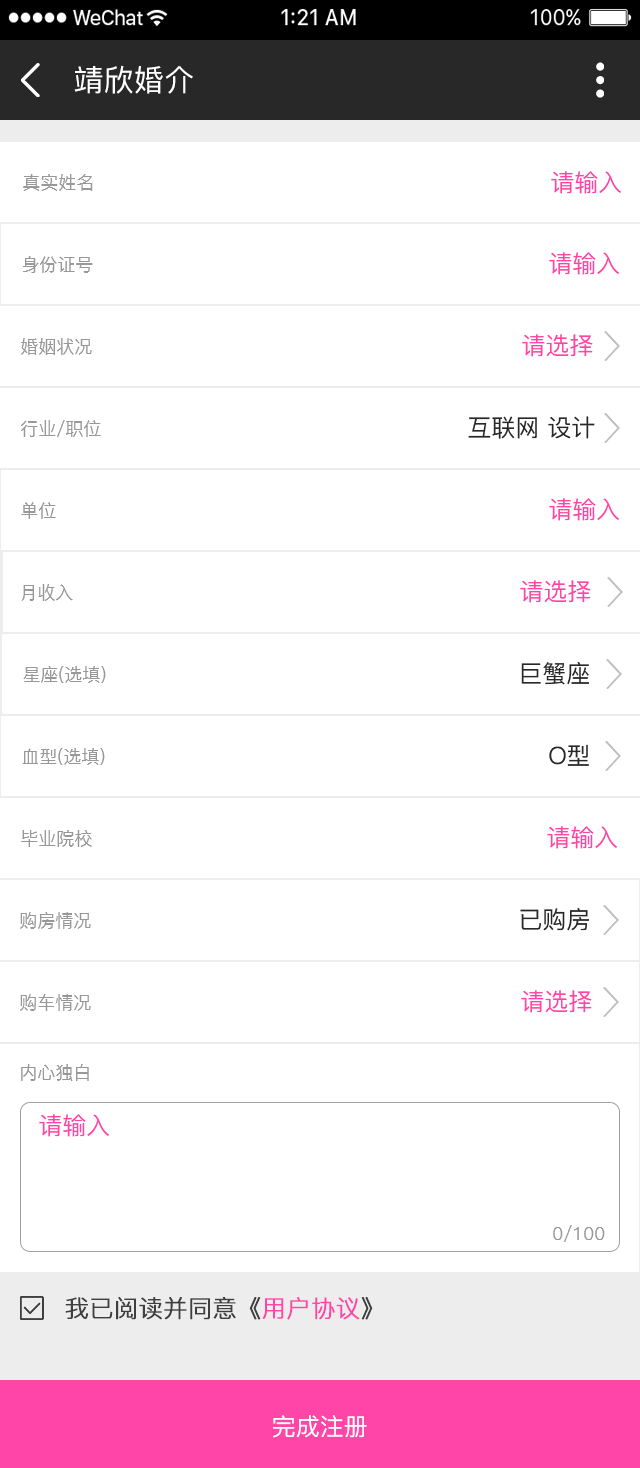
<style>
.page{position:relative;width:640px;height:1468px;background:#ffffff}
.page>*{position:absolute;margin:0}
.t1{font:30px "PingFang-SC-Medium";letter-spacing:0.01em;color:#ffffff;text-transform:uppercase}
.t2{font:18px "PingFang-SC-Medium";color:#989898;text-transform:uppercase}
.t3{font:24px "PingFang-SC-Medium";color:#ff45a8;text-transform:uppercase}
.t4{font:24px "PingFang-SC-Medium";color:#282828;text-transform:uppercase}
.t5{font:24px "PingFang-SC-Regular";color:#3f3f3f;text-transform:uppercase;font-weight:bold}
.t6{font:24px "PingFang-SC-Regular";color:#ff45a8;text-transform:uppercase;font-weight:bold}
.t7{font:24px "PingFang-SC-Medium";color:#ffffff;text-transform:uppercase}
</style>
<div class="page">
<p class="t1" style="left:74px;top:65px;width:119px;height:29px">靖欣婚介</p>
<p class="t2" style="left:23px;top:174px;width:70px;height:17px">真实姓名</p>
<p class="t3" style="left:551px;top:171px;width:71px;height:23px">请输入</p>
<p class="t2" style="left:22px;top:256px;width:71px;height:17px">身份证号</p>
<p class="t3" style="left:549px;top:252px;width:71px;height:23px">请输入</p>
<p class="t2" style="left:21px;top:338px;width:71px;height:17px">婚姻状况</p>
<p class="t3" style="left:522px;top:334px;width:71px;height:23px">请选择</p>
<p class="t2" style="left:21px;top:420px;width:80px;height:17px">行业/职位</p>
<p class="t4" style="left:468px;top:416px;width:127px;height:23px">互联网 设计</p>
<p class="t2" style="left:21px;top:502px;width:35px;height:17px">单位</p>
<p class="t3" style="left:549px;top:498px;width:71px;height:23px">请输入</p>
<p class="t3" style="left:520px;top:580px;width:71px;height:23px">请选择</p>
<p class="t2" style="left:21px;top:584px;width:52px;height:17px">月收入</p>
<p class="t4" style="left:521px;top:662px;width:68px;height:23px">巨蟹座</p>
<p class="t2" style="left:23px;top:666px;width:83px;height:17px">星座(选填)</p>
<p class="t2" style="left:22px;top:748px;width:83px;height:17px">血型(选填)</p>
<p class="t4" style="left:549px;top:744px;width:40px;height:22px">o型</p>
<p class="t2" style="left:21px;top:830px;width:71px;height:17px">毕业院校</p>
<p class="t3" style="left:547px;top:826px;width:71px;height:23px">请输入</p>
<p class="t2" style="left:20px;top:912px;width:71px;height:17px">购房情况</p>
<p class="t4" style="left:520px;top:908px;width:69px;height:23px">已购房</p>
<p class="t3" style="left:521px;top:990px;width:71px;height:23px">请选择</p>
<p class="t2" style="left:20px;top:994px;width:71px;height:17px">购车情况</p>
<p class="t2" style="left:21px;top:1064px;width:68px;height:17px">内心独白</p>
<p class="t3" style="left:39px;top:1114px;width:71px;height:23px">请输入</p>
<p class="t2" style="left:553px;top:1225px;width:52px;height:17px">0/100</p>
<p class="t5" style="left:65px;top:1297px;width:308px;height:23px">我已阅读并同意《<span class="t6">用户协议</span>》</p>
<p class="t7" style="left:273px;top:1415px;width:94px;height:23px">完成注册</p>
</div>
